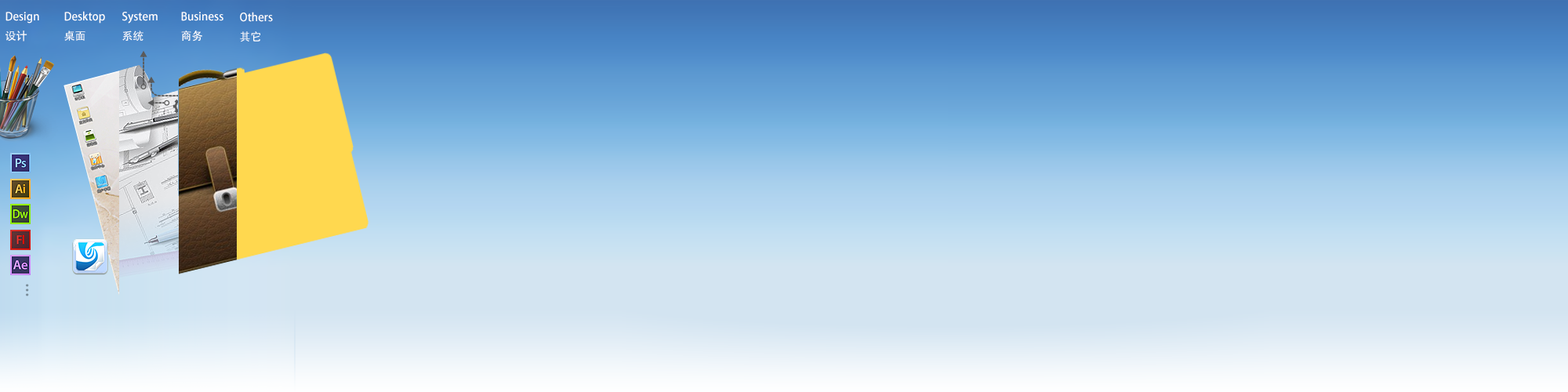
<style>
.page{position:relative;width:1568px;height:392px}
.page>*{position:absolute;margin:0}
.t1{font:11px "AdobeHeitiStd-Regular";color:#ffffff}
.t2{font:14.1px/4.7px "AdobeHeitiStd-Regular";color:#7a8c99;font-weight:bold}
</style>
<div class="page">
<p class="t1" style="left:5px;top:12px;width:34px;height:30px">Design<br>设计</p>
<p class="t1" style="left:64px;top:11px;width:41px;height:30px">Desktop <br>桌面</p>
<p class="t1" style="left:122px;top:12px;width:36px;height:29px">System<br>系统</p>
<p class="t1" style="left:181px;top:12px;width:42px;height:30px">Business<br>商务</p>
<p class="t1" style="left:240px;top:12px;width:33px;height:30px">Others<br>其它</p>
<p class="t2" style="left:26px;top:284px;width:3px;height:12px">.<br>.<br>.</p>
</div>
